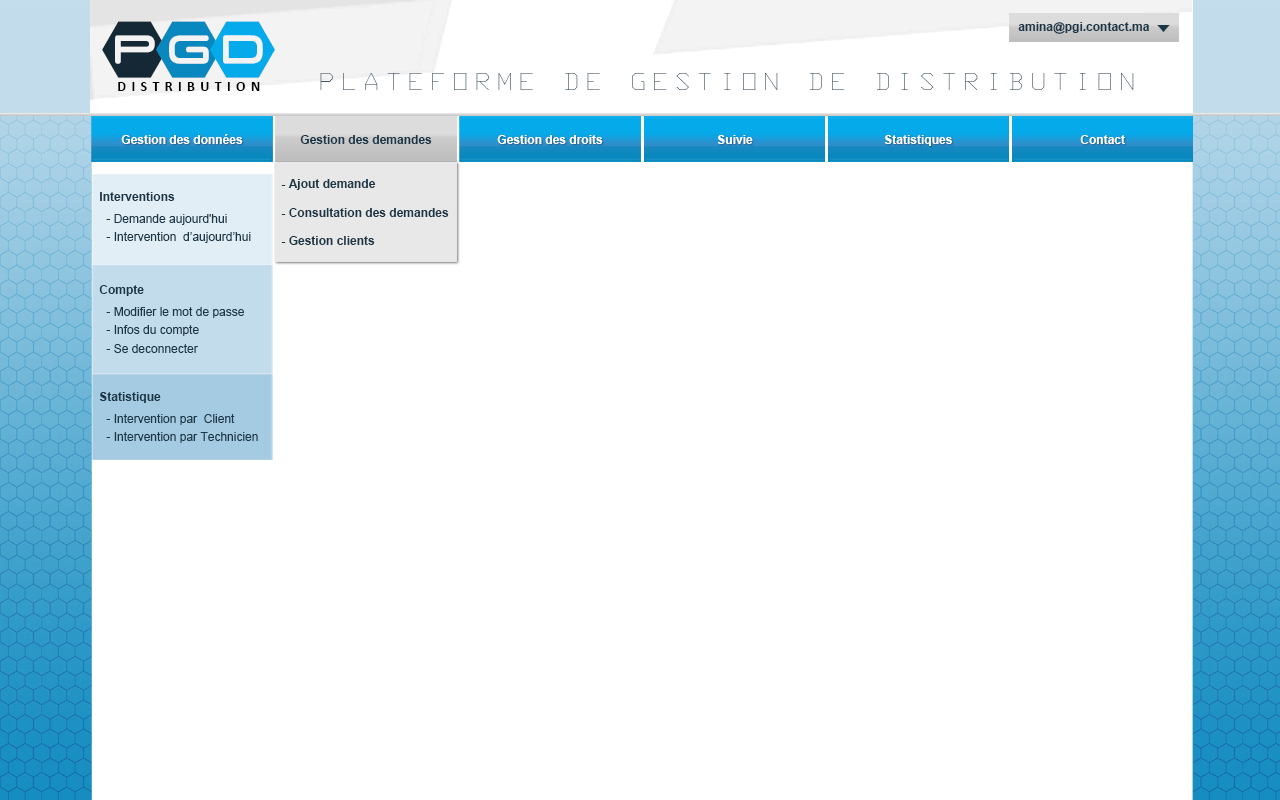
<style>
.page{position:relative;width:1280px;height:800px;background:#ffffff}
.page>*{position:absolute;margin:0}
.t1{font:96.3px "FrauleinHex";color:#152836;text-transform:uppercase}
.t2{font:96.3px "FrauleinHex";color:#0888be;text-transform:uppercase}
.t3{font:96.3px "FrauleinHex";color:#04aae9;text-transform:uppercase}
.t4{font:12px "Arial-BoldMT";color:#1b3647}
.t5{font:24px "Monotxt";letter-spacing:0.2em;color:#415666;text-transform:uppercase}
.t6{font:14.4px "Calibri-Bold";letter-spacing:0.36em;color:#000000;text-transform:uppercase}
.t7{font:12px "Arial-BoldMT";color:#ffffff}
.t8{font:12px "ArialMT";color:#1b3647}
</style>
<div class="page">
<p class="t1" style="left:102px;top:21px;width:173px;height:57px">P<span class="t2">G</span><span class="t3">D</span></p>
<p class="t4" style="left:1018px;top:22px;width:131px;height:12px">amina@pgi.contact.ma</p>
<p class="t5" style="left:320px;top:73px;width:814px;height:17px">plateforme de gestion de distribution</p>
<p class="t6" style="left:118px;top:82px;width:142px;height:9px">Distribution</p>
<p class="t7" style="left:121px;top:134px;width:122px;height:10px">Gestion des données</p>
<p class="t4" style="left:300px;top:135px;width:132px;height:9px">Gestion des demandes</p>
<p class="t7" style="left:497px;top:135px;width:106px;height:9px">Gestion des droits</p>
<p class="t7" style="left:717px;top:135px;width:36px;height:9px">Suivie</p>
<p class="t7" style="left:884px;top:135px;width:68px;height:11px">Statistiques</p>
<p class="t7" style="left:1080px;top:135px;width:45px;height:9px">Contact</p>
<p class="t4" style="left:281px;top:179px;width:95px;height:11px">- Ajout demande</p>
<p class="t4" style="left:100px;top:192px;width:75px;height:9px">Interventions</p>
<p class="t4" style="left:281px;top:208px;width:168px;height:9px">- Consultation des demandes</p>
<p class="t8" style="left:106px;top:214px;width:121px;height:11px">- Demande aujourd'hui</p>
<p class="t8" style="left:106px;top:232px;width:145px;height:11px">- Intervention  d’aujourd’hui</p>
<p class="t4" style="left:281px;top:236px;width:94px;height:9px">- Gestion clients</p>
<p class="t4" style="left:99px;top:285px;width:45px;height:11px">Compte</p>
<p class="t8" style="left:106px;top:307px;width:138px;height:11px">- Modifier le mot de passe</p>
<p class="t8" style="left:106px;top:325px;width:93px;height:11px">- Infos du compte</p>
<p class="t8" style="left:106px;top:344px;width:92px;height:9px">- Se deconnecter</p>
<p class="t4" style="left:99px;top:392px;width:62px;height:11px">Statistique</p>
<p class="t8" style="left:106px;top:414px;width:129px;height:11px">- Intervention par  Client</p>
<p class="t8" style="left:106px;top:432px;width:152px;height:11px">- Intervention par Technicien</p>
</div>
